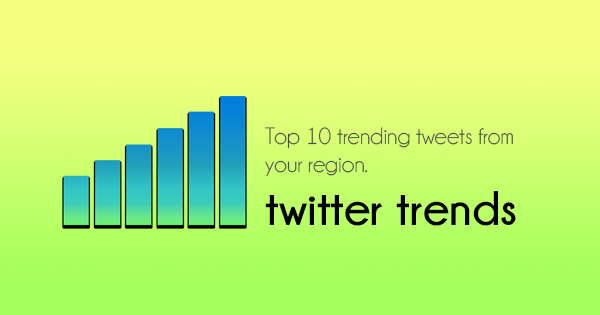
<style>
.page{position:relative;width:600px;height:315px}
.page>*{position:absolute;margin:0}
.t1{font:24px "Champagne&Limousines";color:#4c4c4c}
.t2{font:48.4px "Champagne&Limousines-Bold";color:#010101}
</style>
<div class="page">
<p class="t1" style="left:265px;top:127px;width:248px;height:49px">Top 10 trending tweets from your region.</p>
<p class="t2" style="left:265px;top:191px;width:251px;height:35px">twitter trends</p>
</div>
